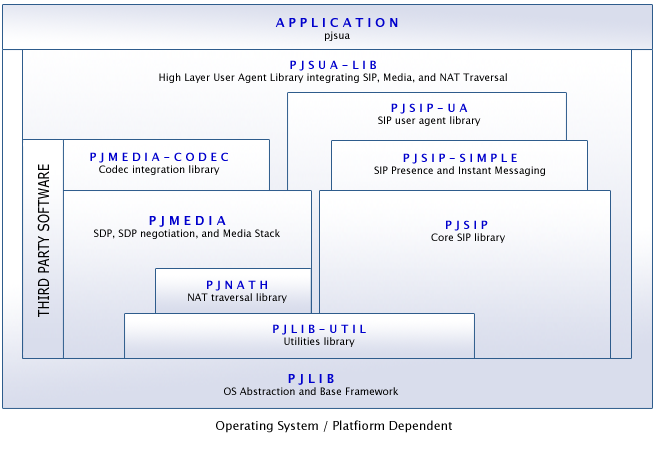
<style>
.page{position:relative;width:656px;height:450px}
.page>*{position:absolute;margin:0}
.t1{font:12px "LucidaSans-Demi";color:#0000cc}
.t2{font:10px "LucidaSans";color:#000000}
.t3{font:11px "LucidaSans-Demi";color:#0000cc}
.t4{font:15.3px "Verdana";color:#000000;scale:0.79 1}
.t5{font:12px "LucidaSans";color:#000000}
</style>
<div class="page">
<p class="t1" style="left:275px;top:18px;width:123px;height:23px;text-align:center">A P P L I C A T I O N<br><span class="t2">pjsua</span></p>
<p class="t2" style="left:159px;top:60px;width:348px;height:23px;text-align:center"><span class="t3">P J S U A - L I B<br></span>High Layer User Agent Library integrating SIP, Media, and NAT Traversal</p>
<p class="t2" style="left:378px;top:103px;width:103px;height:23px;text-align:center"><span class="t3">P J S I P - U A<br></span>SIP user agent library</p>
<p class="t3" style="left:90px;top:152px;width:138px;height:23px;text-align:center">P J M E D I A - C O D E C<br><span class="t2">Codec integration library</span></p>
<p class="t2" style="left:374px;top:153px;width:171px;height:23px;text-align:center"><span class="t3">P J S I P - S I M P L E<br></span>SIP Presence and Instant Messaging</p>
<p class="t4" style="left:37px;top:164px;width:13px;height:153px;rotate:-90deg">THIRD PARTY SOFTWARE</p>
<p class="t2" style="left:94px;top:216px;width:186px;height:23px;text-align:center"><span class="t1">P J M E D I A<br></span>SDP, SDP negotiation, and Media Stack</p>
<p class="t2" style="left:431px;top:220px;width:74px;height:23px;text-align:center"><span class="t3">P J S I P <br></span>Core SIP library</p>
<p class="t2" style="left:188px;top:280px;width:99px;height:23px;text-align:center"><span class="t3">P J N A T H<br></span>NAT traversal library</p>
<p class="t3" style="left:273px;top:324px;width:93px;height:23px;text-align:center">P J L I B - U T I L<br><span class="t2">Utilities library</span></p>
<p class="t2" style="left:224px;top:374px;width:175px;height:21px;text-align:center"><span class="t1">P J L I B<br></span>OS Abstraction and Base Framework</p>
<p class="t5" style="left:216px;top:420px;width:236px;height:13px">Operating System / Platfiorm Dependent</p>
</div>
